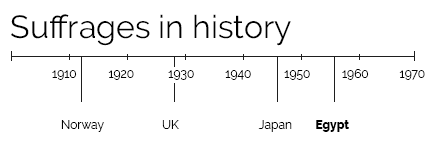
<style>
.page{position:relative;width:441px;height:144px;background:#ffffff}
.page>*{position:absolute;margin:0}
.t1{font:32px "Raleway-Regular";color:#000000}
.t2{font:12px "Raleway-Regular";color:#000000}
.t3{font:12px "Raleway-ExtraBold";color:#000000}
</style>
<div class="page">
<p class="t1" style="left:11px;top:14px;width:280px;height:32px">Suffrages in history</p>
<p class="t2" style="left:52px;top:70px;width:25px;height:10px">1910</p>
<p class="t2" style="left:108px;top:70px;width:26px;height:10px">1920</p>
<p class="t2" style="left:168px;top:70px;width:26px;height:10px">1930</p>
<p class="t2" style="left:225px;top:70px;width:26px;height:10px">1940</p>
<p class="t2" style="left:284px;top:70px;width:26px;height:10px">1950</p>
<p class="t2" style="left:342px;top:69px;width:27px;height:11px">1960</p>
<p class="t2" style="left:399px;top:70px;width:26px;height:10px">1970</p>
<p class="t2" style="left:61px;top:120px;width:43px;height:12px">Norway</p>
<p class="t2" style="left:162px;top:120px;width:17px;height:9px">UK</p>
<p class="t2" style="left:258px;top:120px;width:34px;height:12px">Japan</p>
<p class="t3" style="left:316px;top:120px;width:33px;height:12px">Egypt</p>
</div>
